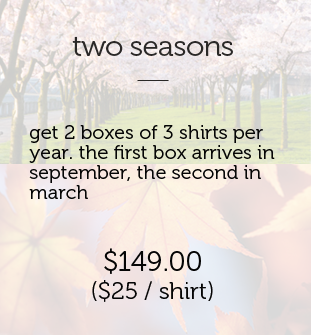
<style>
.page{position:relative;width:312px;height:335px}
.page>*{position:absolute;margin:0}
.t1{font:30px "Museo-300";letter-spacing:-0.025em;color:#2a2827}
.t2{font:20px/20px "Museo-300";color:#050505}
.t3{font:24px "Museo-300";color:#050505}
.t4{font:28px "Museo-300";color:#050505}
</style>
<div class="page">
<p class="t1" style="left:72px;top:36px;width:161px;height:20px">two seasons</p>
<p class="t2" style="left:29px;top:125px;width:246px;height:74px">get 2 boxes of 3 shirts per year. the first box arrives in september, the second in march</p>
<p class="t3" style="left:92px;top:248px;width:121px;height:54px;text-align:center"><span class="t4">$149.00<br></span>($25 / shirt)</p>
</div>
